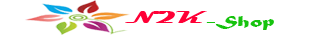
<style>
.page{position:relative;width:330px;height:35px;background:#ffffff}
.page>*{position:absolute;margin:0}
.t1{font:16.6px "Magneto-Bold";color:#ff0036;scale:1.84 1}
.t2{font:16.5px "MaturaMTScriptCapitals";color:#16c30e;scale:1.54 1}
</style>
<div class="page">
<p class="t1" style="left:125px;top:11px;width:82px;height:12px">N2K</p>
<p class="t2" style="left:206px;top:16px;width:68px;height:14px">-Shop</p>
</div>
